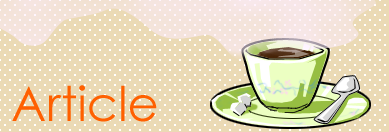
<style>
.page{position:relative;width:389px;height:132px;background:#ebdab5}
.page>*{position:absolute;margin:0}
.t1{font:48px "CenturyGothic";color:#ff6000}
</style>
<div class="page">
<p class="t1" style="left:12px;top:85px;width:145px;height:37px">Article</p>
</div>
